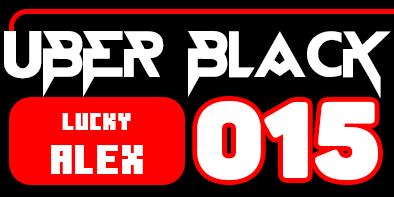
<style>
.page{position:relative;width:394px;height:197px;background:#000000}
.page>*{position:absolute;margin:0}
.t1{font:65.3px "BlackStarFJNTBYLYAJKA";color:#ffffff;text-transform:uppercase}
.t2{font:106.9px "Panton-ExtraBlack";color:#ffffff;text-transform:uppercase}
.t3{font:25px "MinecraftTen";color:#ffffff;text-transform:uppercase}
.t4{font:41.7px "MinecraftTen";color:#ffffff;text-transform:uppercase}
</style>
<div class="page">
<p class="t1" style="left:4px;top:31px;width:387px;height:67px">UBER BLACK</p>
<p class="t2" style="left:197px;top:101px;width:181px;height:80px">015</p>
<p class="t3" style="left:62px;top:113px;width:69px;height:17px">LUCKY</p>
<p class="t4" style="left:51px;top:145px;width:92px;height:29px">ALEX</p>
</div>
